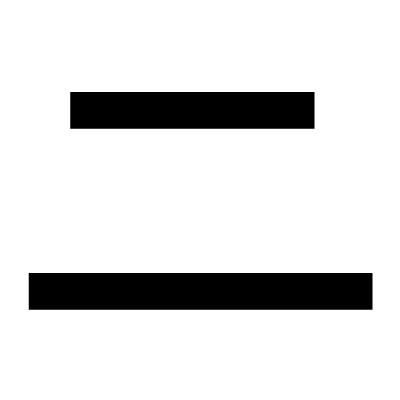
<style>
.page{position:relative;width:400px;height:400px;background:#ffffff}
.page>*{position:absolute;margin:0}
.t1{font:424.8px "MS-PGothic";color:#000000}
</style>
<div class="page">
<p class="t1" style="left:28px;top:92px;width:345px;height:218px">ニ</p>
</div>
